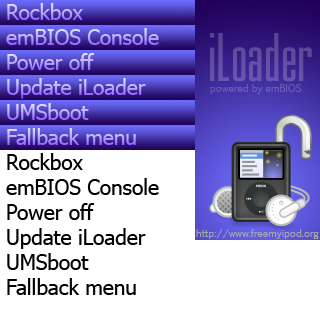
<style>
.page{position:relative;width:320px;height:320px;background:#ffffff}
.page>*{position:absolute;margin:0}
.t1{font:20.8px "Tahoma"}
.t2{font:72px "MekanikLetPlain";color:#614fa3}
.t3{font:10px "EuphemiaCAS";color:#6b5db7}
.t4{font:20.8px "Tahoma";color:#000000}
.t5{font:10px "EuphemiaCAS";color:#a8a8a8}
</style>
<div class="page">
<p class="t1" style="left:6px;top:3px;width:153px;height:142px">Rockbox<br>emBIOS Console<br>Power off<br>Update iLoader<br>UMSboot<br>Fallback menu</p>
<p class="t1" style="left:6px;top:3px;width:153px;height:142px">Rockbox<br>emBIOS Console<br>Power off<br>Update iLoader<br>UMSboot<br>Fallback menu</p>
<p class="t2" style="left:210px;top:33px;width:102px;height:49px">iLoader</p>
<p class="t3" style="left:210px;top:84px;width:92px;height:10px">powered by emBIOS</p>
<p class="t4" style="left:6px;top:153px;width:153px;height:142px">Rockbox<br>emBIOS Console<br>Power off<br>Update iLoader<br>UMSboot<br>Fallback menu</p>
<p class="t5" style="left:196px;top:229px;width:123px;height:10px">http://www.freemyipod.org</p>
</div>
